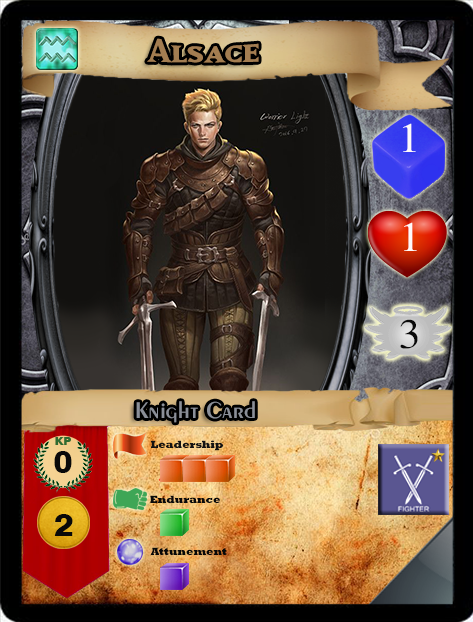
<style>
.page{position:relative;width:473px;height:622px}
.page>*{position:absolute;margin:0}
.t1{font:40px "MatrixBoldSmallCaps";color:#a37d51;scale:1.06 1}
.t2{font:40px "SimplifiedArabic";color:#fef9f9;scale:1.05 1}
.t3{font:40px "SimplifiedArabic";color:#090909;scale:1.05 1}
.t4{font:24px "Exotic350BT-DemiBold";color:#8b8f98;scale:1.06 1}
.t5{font:12px "PlakLT-Black";color:#2e6c30}
.t6{font:10.7px "Rockwell-ExtraBold";color:#131212}
.t7{font:32px "Swiss721BT-Heavy";color:#090909}
.t8{font:10.7px "Rockwell-ExtraBold";color:#090909}
.t9{font:32px "Swiss721BT-Heavy";color:#090909;scale:1.05 1}
.t10{font:10.7px "Rockwell-ExtraBold";color:#080808}
</style>
<div class="page">
<p class="t1" style="left:147px;top:38px;width:112px;height:25px">Alsace</p>
<p class="t2" style="left:403px;top:123px;width:13px;height:29px">1</p>
<p class="t2" style="left:404px;top:222px;width:13px;height:29px">1</p>
<p class="t3" style="left:400px;top:319px;width:18px;height:30px">3</p>
<p class="t4" style="left:136px;top:401px;width:119px;height:22px">Knight Card</p>
<p class="t5" style="left:55px;top:437px;width:16px;height:8px">KP</p>
<p class="t6" style="left:151px;top:440px;width:72px;height:11px">Leadership</p>
<p class="t7" style="left:54px;top:451px;width:18px;height:22px">0</p>
<p class="t8" style="left:150px;top:495px;width:70px;height:8px">Endurance</p>
<p class="t9" style="left:54px;top:514px;width:19px;height:22px">2</p>
<p class="t10" style="left:151px;top:547px;width:76px;height:8px">Attunement</p>
</div>
